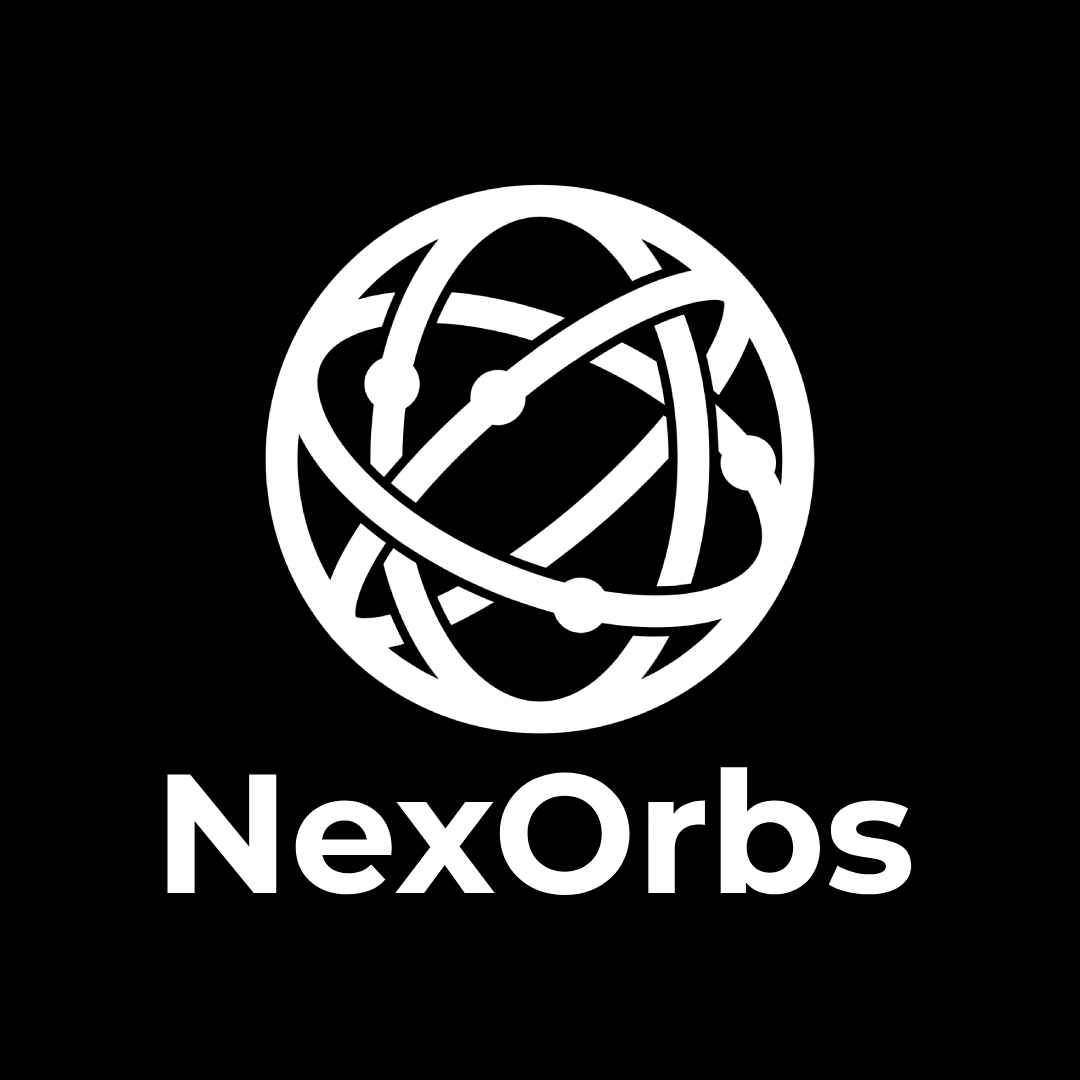
<style>
.page{position:relative;width:1080px;height:1080px;background:#000000}
.page>*{position:absolute;margin:0}
.t1{font:169.4px "Montserrat-Bold";color:#ffffff}
</style>
<div class="page">
<p class="t1" style="left:167px;top:767px;width:745px;height:128px">NexOrbs</p>
</div>
